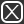
<style>
.page{position:relative;width:24px;height:24px;background:#333333}
.page>*{position:absolute;margin:0}
.t1{font:19px "ArialMT";color:#ffffff;scale:1.21 1}
</style>
<div class="page">
<p class="t1" style="left:4px;top:5px;width:15px;height:14px">X</p>
</div>
